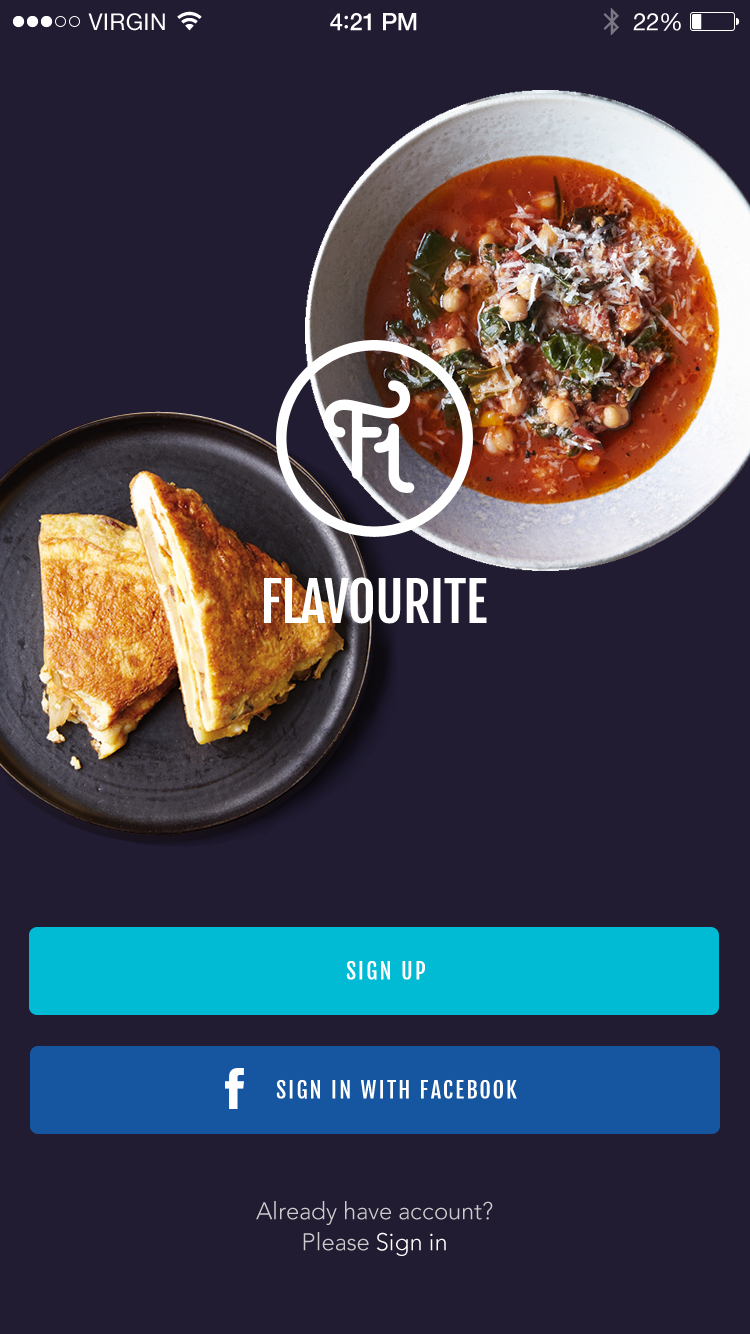
<style>
.page{position:relative;width:750px;height:1334px;background:#211c32}
.page>*{position:absolute;margin:0}
.t1{font:54px "FjallaOne-Regular";letter-spacing:-0.02em;color:#ffffff}
.t2{font:22px "FjallaOne-Regular";letter-spacing:0.1em;color:#ffffff}
.t3{font:24px/31.2px "Avenir-Light";color:#cccccc}
.t4{font:24px/31.2px "Avenir-Light";color:#ffffff}
</style>
<div class="page">
<p class="t1" style="left:264px;top:577px;width:223px;height:47px">FLAVOURITE</p>
<p class="t2" style="left:346px;top:960px;width:79px;height:20px">SIGN UP</p>
<p class="t2" style="left:276px;top:1079px;width:241px;height:20px">SIGN IN WITH FACEBOOK</p>
<p class="t3" style="left:256px;top:1201px;width:237px;height:55px;text-align:center">Already have account?<br>Please <span class="t4">Sign in</span></p>
</div>
